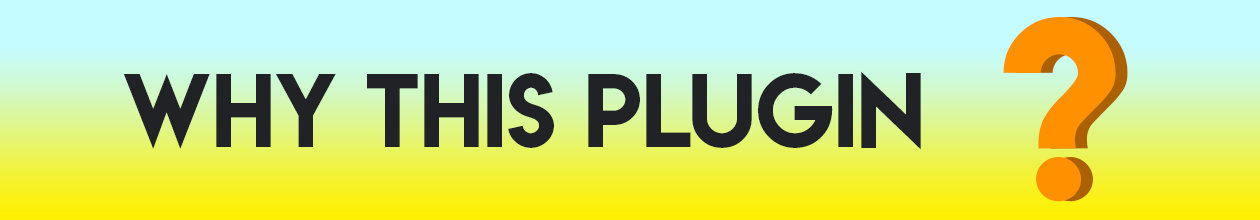
<style>
.page{position:relative;width:1260px;height:220px}
.page>*{position:absolute;margin:0}
.t1{font:222px "LemonMilk";color:#ff9000}
.t2{font:93px "LemonMilk";color:#202225}
</style>
<div class="page">
<p class="t1" style="left:1003px;top:17px;width:113px;height:185px">?</p>
<p class="t1" style="left:1015px;top:17px;width:113px;height:185px">?</p>
<p class="t2" style="left:123px;top:71px;width:798px;height:79px">WHY THIS PLUGIN</p>
</div>
